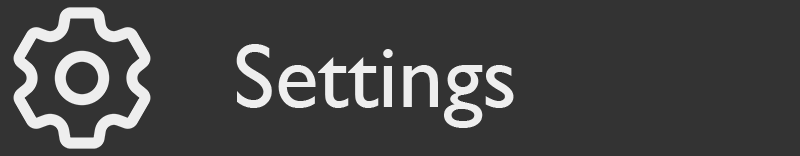
<style>
.page{position:relative;width:800px;height:156px;background:#333333}
.page>*{position:absolute;margin:0}
.t1{font:90.5px "GillSansMT";color:#eeeeee}
</style>
<div class="page">
<p class="t1" style="left:236px;top:44px;width:278px;height:84px">Settings</p>
</div>
